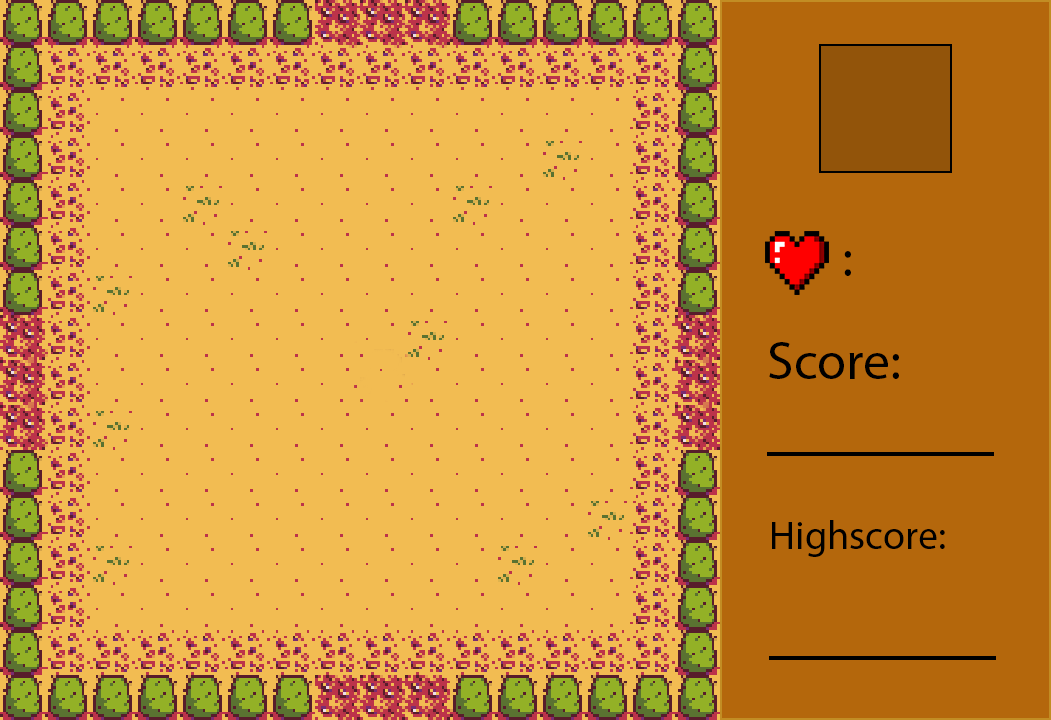
<style>
.page{position:relative;width:1051px;height:720px;background:#f2bc52}
.page>*{position:absolute;margin:0}
.t1{font:53.3px "MyriadPro-Regular";color:#000000}
.t2{font:40px "MyriadPro-Regular";color:#000000}
</style>
<div class="page">
<p class="t1" style="left:844px;top:251px;width:7px;height:25px">:</p>
<p class="t1" style="left:769px;top:342px;width:130px;height:37px">Score:</p>
<p class="t2" style="left:772px;top:520px;width:173px;height:37px">Highscore:</p>
</div>
